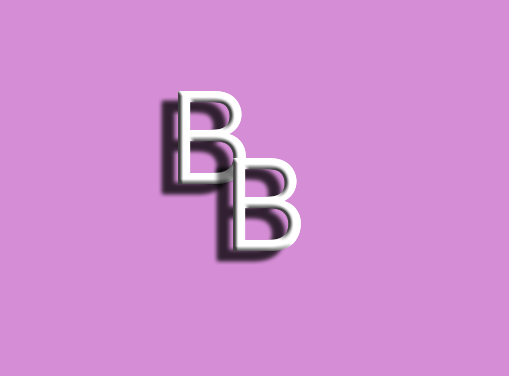
<style>
.page{position:relative;width:509px;height:376px;background:#d58dd6}
.page>*{position:absolute;margin:0}
.t1{font:129.3px "ArialMT";letter-spacing:-0.02em;scale:0.97 1}
.t2{font:129.3px "ArialMT";letter-spacing:-0.02em;color:#ffffff;scale:0.97 1}
</style>
<div class="page">
<p class="t1" style="left:178px;top:91px;width:68px;height:93px">B</p>
<p class="t2" style="left:233px;top:158px;width:68px;height:93px">B</p>
</div>
